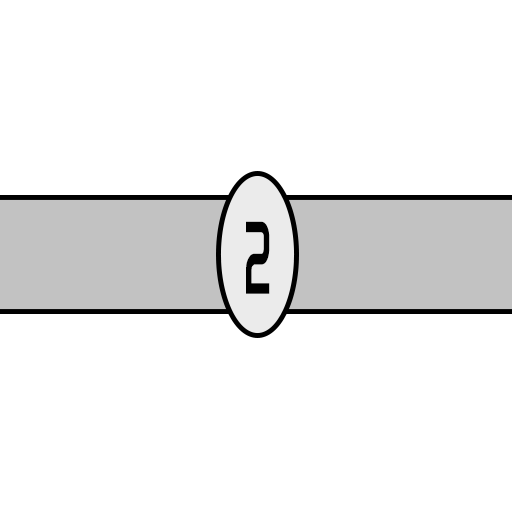
<style>
.page{position:relative;width:512px;height:512px;background:#ffffff}
.page>*{position:absolute;margin:0}
.t1{font:99.9px "PrisonerSF";color:#000000;scale:0.5 1}
</style>
<div class="page">
<p class="t1" style="left:246px;top:221px;width:24px;height:73px">2</p>
</div>
